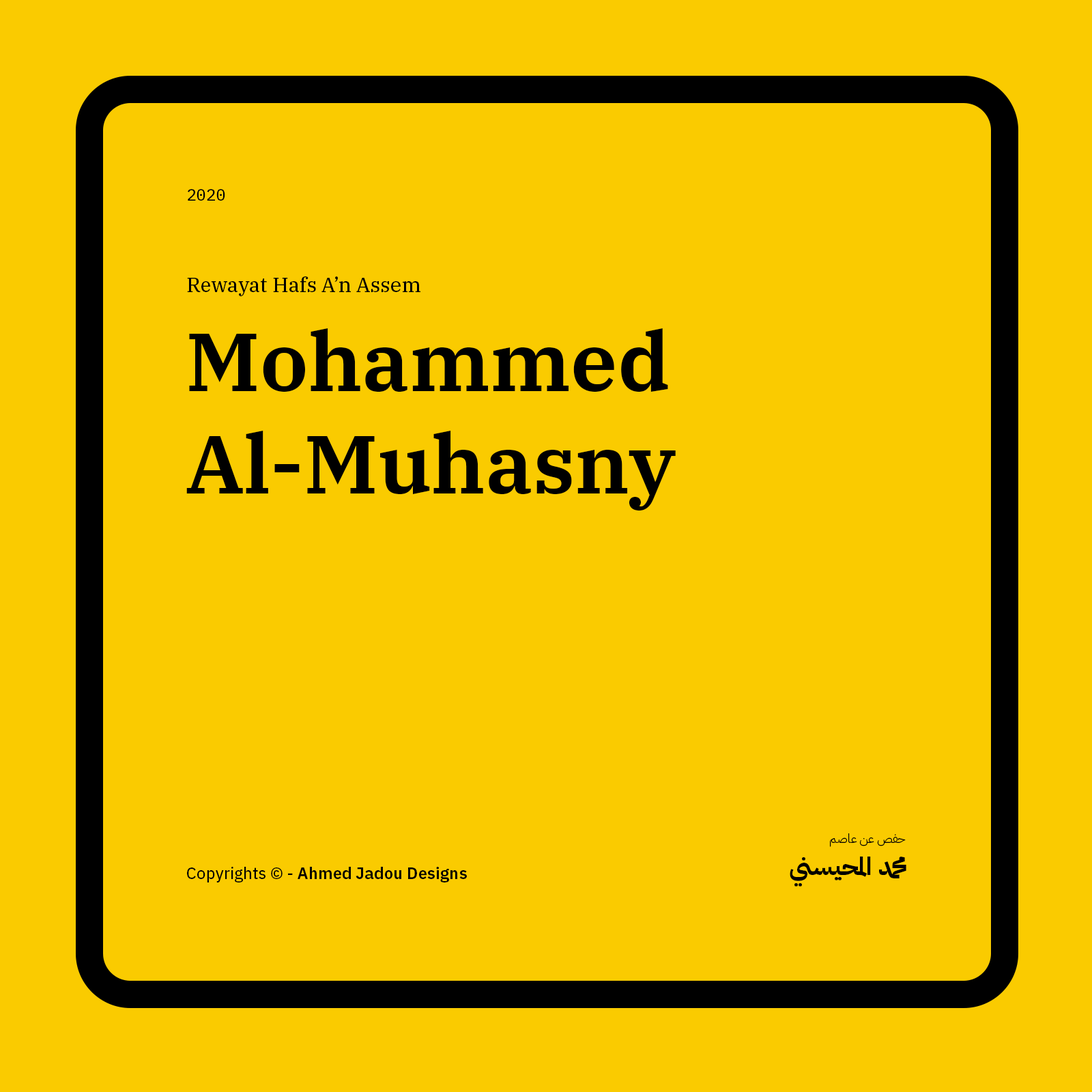
<style>
.page{position:relative;width:1092px;height:1092px;background:#facb00}
.page>*{position:absolute;margin:0}
.t1{font:16.4px "IBMPlexMono-Text";color:#000000}
.t2{font:20.5px "IBMPlexSerif-Text";color:#000000}
.t3{font:81.9px/102.7px "IBMPlexSerif-SemiBold";color:#000000}
.t4{font:12.3px "IBMPlexArabic-Light";color:#000000}
.t5{font:24.6px "IBMPlexArabic-Bold";color:#000000}
.t6{font:16.4px "IBMPlexSans-SemiBold";color:#000000}
.t7{font:16.4px "IBMPlexSans-Text";color:#000000}
</style>
<div class="page">
<p class="t1" style="left:188px;top:189px;width:37px;height:12px">2020</p>
<p class="t2" style="left:187px;top:276px;width:233px;height:20px">Rewayat Hafs A’n Assem</p>
<p class="t3" style="left:186px;top:328px;width:490px;height:183px">Mohammed Al-Muhasny</p>
<p class="t4" style="left:830px;top:833px;width:76px;height:14px">حفص عن عاصم</p>
<p class="t5" style="left:790px;top:857px;width:116px;height:30px">محمد المحيسني</p>
<p class="t6" style="left:187px;top:867px;width:280px;height:15px"><span class="t7">Copyrights © - </span>Ahmed Jadou Designs</p>
</div>
